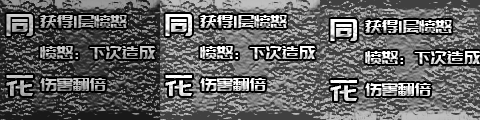
<style>
.page{position:relative;width:480px;height:120px}
.page>*{position:absolute;margin:0}
.t1{font:30px/60px "PangMenZhengDao";letter-spacing:-0.01em;color:#bebebe}
.t2{font:18px "PangMenZhengDao";letter-spacing:-0.01em}
.t3{font:30px/60px "PangMenZhengDao";letter-spacing:-0.01em;color:#ffffff}
.t4{font:18px "PangMenZhengDao";letter-spacing:-0.01em;color:#ffffff}
</style>
<div class="page">
<p class="t1" style="left:6px;top:14px;width:27px;height:82px">同<br>花</p>
<p class="t2" style="left:40px;top:15px;width:116px;height:76px">获得1层愤怒<br>愤怒：下次造成伤害翻倍</p>
<p class="t3" style="left:165px;top:14px;width:27px;height:82px">同<br>花</p>
<p class="t4" style="left:200px;top:15px;width:116px;height:76px">获得1层愤怒<br>愤怒：下次造成伤害翻倍</p>
<p class="t3" style="left:330px;top:19px;width:27px;height:82px">同<br>花</p>
<p class="t4" style="left:365px;top:20px;width:116px;height:76px">获得1层愤怒<br>愤怒：下次造成伤害翻倍</p>
</div>
